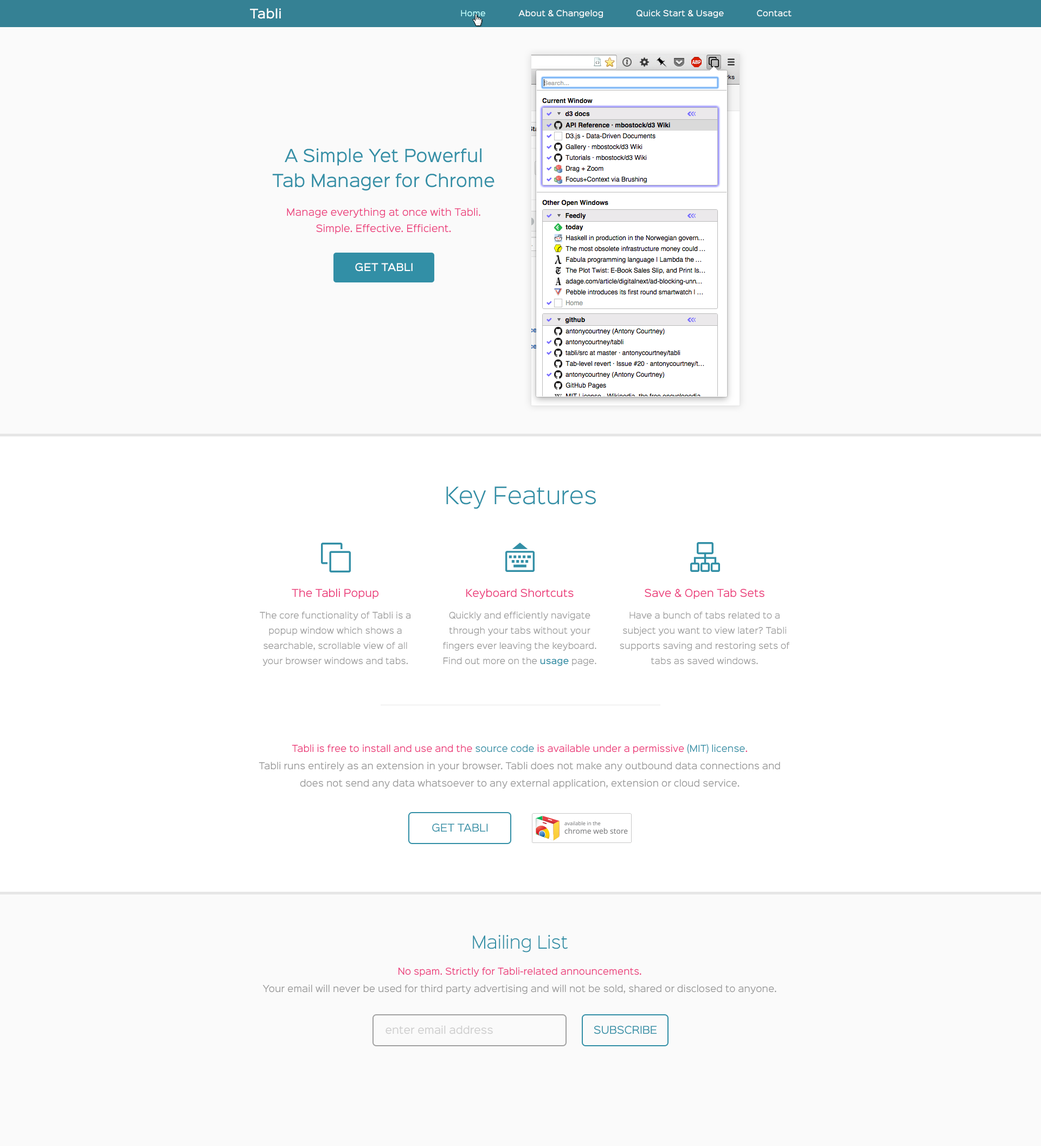
<style>
.page{position:relative;width:1041px;height:1146px;background:#fafafa}
.page>*{position:absolute;margin:0}
.t1{font:11.9px "SinkinSans-500Medium";color:#ffffff}
.t2{font:7.6px "SinkinSans-500Medium";color:#ffffff}
.t3{font:7.6px "SinkinSans-500Medium";color:#befffd}
.t4{font:16.3px/24.9px "SinkinSans-400Regular";color:#328fa6}
.t5{font:9.2px/16.3px "SinkinSans-400Regular";color:#eb3979}
.t6{font:9.8px "SinkinSans-500Medium";color:#ffffff}
.t7{font:21.7px "SinkinSans-300Light";color:#328fa6}
.t8{font:8.1px/15.2px "SinkinSans-400Regular";color:#989898}
.t9{font:9.8px/24.9px "SinkinSans-400Regular";color:#eb3979}
.t10{font:8.1px/15.2px "SinkinSans-500Medium";color:#328fa6}
.t11{font:8.7px/17.3px "SinkinSans-400Regular";color:#999999}
.t12{font:8.7px/17.3px "SinkinSans-400Regular";color:#eb3979}
.t13{font:8.7px/17.3px "SinkinSans-400Regular";color:#328fa6}
.t14{font:9.8px "SinkinSans-400Regular";color:#328fa6}
.t15{font:16.3px "SinkinSans-300Light";color:#328fa6}
.t16{font:9.8px "SinkinSans-400Regular";color:#cdcdcd}
</style>
<div class="page">
<p class="t1" style="left:250px;top:8px;width:31px;height:11px">Tabli</p>
<p class="t2" style="left:461px;top:10px;width:330px;height:8px"><span class="t3">Home</span>              About &amp; Changelog              Quick Start &amp; Usage              Contact</p>
<p class="t4" style="left:272px;top:148px;width:222px;height:43px;text-align:center">A Simple Yet Powerful Tab Manager for Chrome</p>
<p class="t5" style="left:287px;top:208px;width:193px;height:26px;text-align:center">Manage everything at once with Tabli.<br>Simple. Effective. Efficient.</p>
<p class="t6" style="left:355px;top:263px;width:57px;height:9px">GET TABLI</p>
<p class="t7" style="left:446px;top:486px;width:150px;height:23px">Key Features</p>
<p class="t8" style="left:260px;top:588px;width:150px;height:78px;text-align:center"><span class="t9">The Tabli Popup<br></span>The core functionality of Tabli is a popup window which shows a searchable, scrollable view of all your browser windows and tabs.</p>
<p class="t8" style="left:443px;top:589px;width:153px;height:77px;text-align:center"><span class="t9">Keyboard Shortcuts<br></span>Quickly and efficiently navigate through your tabs without your fingers ever leaving the keyboard.<br>Find out more on the <span class="t10">usage </span>page.</p>
<p class="t8" style="left:620px;top:589px;width:169px;height:76px;text-align:center"><span class="t9">Save &amp; Open Tab Sets<br></span>Have a bunch of tabs related to a subject you want to view later? Tabli supports saving and restoring sets of tabs as saved windows.</p>
<p class="t11" style="left:259px;top:744px;width:521px;height:45px;text-align:center"><span class="t12">Tabli is free to install and use and the </span><span class="t13">source code</span><span class="t12"> is available under a permissive </span><span class="t13">(MIT) license</span><span class="t12">.<br></span>Tabli runs entirely as an extension in your browser. Tabli does not make any outbound data connections and does not send any data whatsoever to any external application, extension or cloud service.</p>
<p class="t14" style="left:432px;top:823px;width:56px;height:9px">GET TABLI</p>
<p class="t15" style="left:473px;top:934px;width:95px;height:18px">Mailing List</p>
<p class="t11" style="left:262px;top:967px;width:514px;height:27px;text-align:center"><span class="t12">No spam. Strictly for Tabli-related announcements.<br></span>Your email will never be used for third party advertising and will not be sold, shared or disclosed to anyone.</p>
<p class="t16" style="left:385px;top:1025px;width:108px;height:9px">enter email address</p>
<p class="t14" style="left:594px;top:1025px;width:62px;height:9px">SUBSCRIBE</p>
</div>
